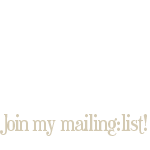
<style>
.page{position:relative;width:150px;height:150px;background:#ffffff}
.page>*{position:absolute;margin:0}
.t1{font:22.7px "Euphorigenic-Regular";letter-spacing:-0.025em;color:#d4cab3}
.t2{font:22.7px "Euphorigenic-Regular";letter-spacing:-0.05em;color:#d4cab3}
</style>
<div class="page">
<p class="t1" style="left:0px;top:114px;width:147px;height:22px"><span class="t2">Join</span> my mailing:list!</p>
</div>
